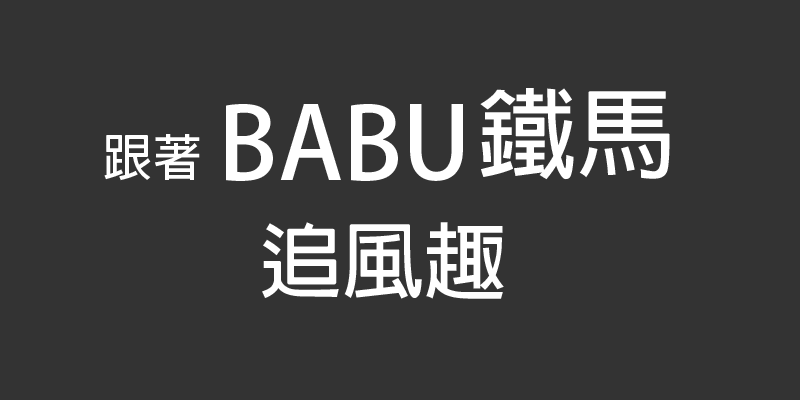
<style>
.page{position:relative;width:800px;height:400px;background:#333333}
.page>*{position:absolute;margin:0}
.t1{font:98.6px "AdobeFanHeitiStd-Bold";color:#ffffff}
.t2{font:49.3px "AdobeFanHeitiStd-Bold";color:#ffffff}
.t3{font:82.2px "AdobeFanHeitiStd-Bold";color:#ffffff}
</style>
<div class="page">
<p class="t1" style="left:480px;top:88px;width:190px;height:92px">鐵馬</p>
<p class="t1" style="left:226px;top:104px;width:237px;height:77px">BABU</p>
<p class="t2" style="left:104px;top:134px;width:96px;height:47px">跟著</p>
<p class="t3" style="left:262px;top:222px;width:242px;height:77px">追風趣</p>
</div>
